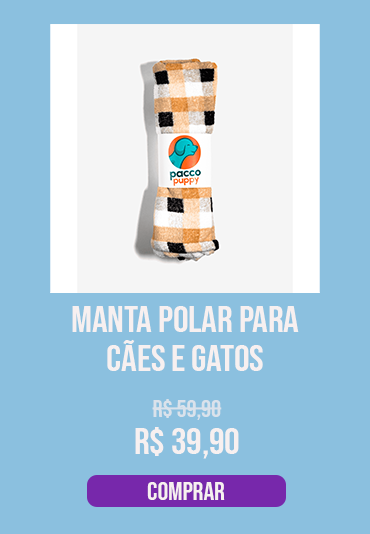
<style>
.page{position:relative;width:370px;height:534px;background:#8bc0df}
.page>*{position:absolute;margin:0}
.t1{font:36.8px "BebasNeue-Regular";letter-spacing:-0.005em;color:#f7f0f0;scale:1.06 1}
.t2{font:23.8px "BebasNeue-Regular";letter-spacing:-0.005em;color:#dae2eb;scale:1.06 1}
.t3{font:25.4px "BebasNeue-Regular";letter-spacing:-0.005em;color:#f7f0f0;scale:1.06 1}
</style>
<div class="page">
<p class="t1" style="left:72px;top:306px;width:227px;height:26px">manta polar para</p>
<p class="t1" style="left:107px;top:339px;width:156px;height:32px">cães e gatos</p>
<p class="t2" style="left:152px;top:399px;width:70px;height:21px">r$ 59,90</p>
<p class="t1" style="left:135px;top:427px;width:104px;height:32px">r$ 39,90</p>
<p class="t3" style="left:147px;top:482px;width:78px;height:18px">comprar</p>
</div>
